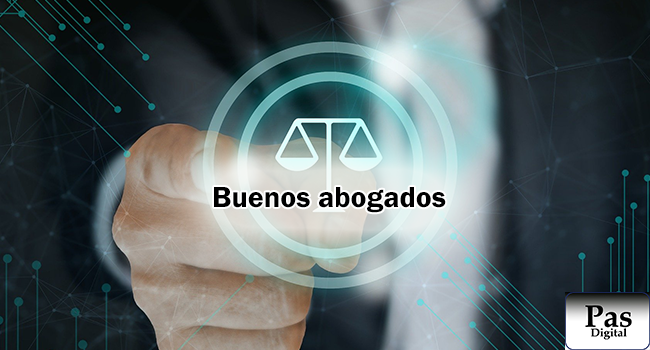
<style>
.page{position:relative;width:650px;height:350px}
.page>*{position:absolute;margin:0}
.t1{font:30px "FranklinGothic-Demi";color:#000000}
</style>
<div class="page">
<p class="t1" style="left:214px;top:187px;width:232px;height:26px">Buenos abogados</p>
</div>
